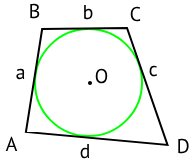
<style>
.page{position:relative;width:196px;height:161px;background:#ffffff}
.page>*{position:absolute;margin:0}
.t1{font:20px "PTSans-Regular";color:#000000}
</style>
<div class="page">
<p class="t1" style="left:30px;top:3px;width:10px;height:16px">B</p>
<p class="t1" style="left:84px;top:5px;width:9px;height:15px">b</p>
<p class="t1" style="left:130px;top:6px;width:11px;height:16px">C</p>
<p class="t1" style="left:149px;top:65px;width:8px;height:12px">c</p>
<p class="t1" style="left:16px;top:68px;width:9px;height:12px">a</p>
<p class="t1" style="left:95px;top:68px;width:13px;height:16px">O</p>
<p class="t1" style="left:5px;top:136px;width:13px;height:15px">A</p>
<p class="t1" style="left:80px;top:144px;width:10px;height:15px">d</p>
<p class="t1" style="left:178px;top:138px;width:11px;height:16px">D</p>
</div>
